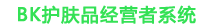
<style>
.page{position:relative;width:216px;height:28px;background:#ffffff}
.page>*{position:absolute;margin:0}
.t1{font:18px "MicrosoftYaHei";letter-spacing:0.05em;color:#34e155;font-weight:bold}
</style>
<div class="page">
<p class="t1" style="left:18px;top:5px;width:178px;height:19px">BK护肤品经营者系统</p>
</div>
